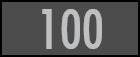
<style>
.page{position:relative;width:140px;height:57px;background:#4c4c4c}
.page>*{position:absolute;margin:0}
.t1{font:53.3px "FuturaCondensed";color:#bebfc1}
</style>
<div class="page">
<p class="t1" style="left:42px;top:9px;width:60px;height:40px">100</p>
</div>
